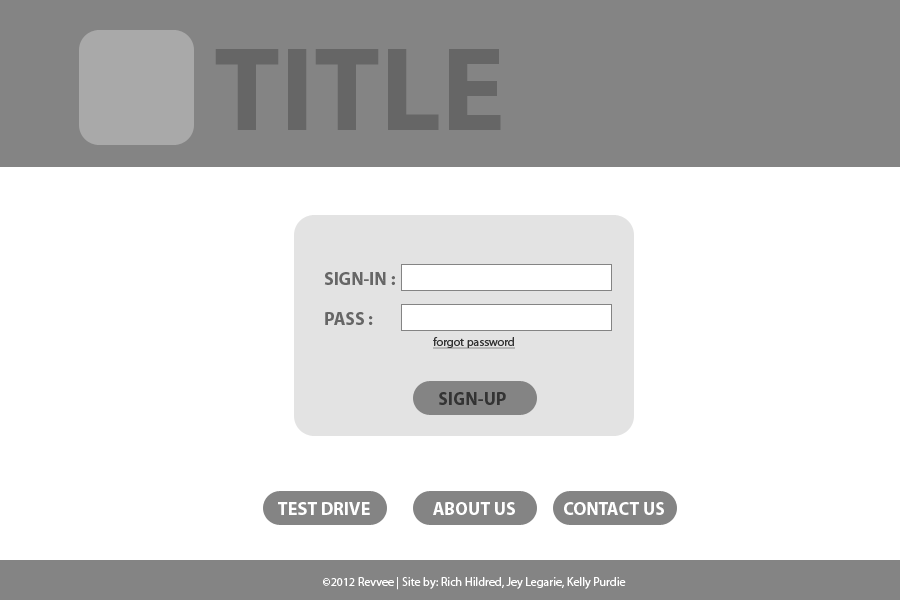
<style>
.page{position:relative;width:900px;height:600px;background:#ffffff}
.page>*{position:absolute;margin:0}
.t1{font:120px "MyriadPro-Bold";color:#666666}
.t2{font:18px/20px "MyriadPro-Bold";color:#666666}
.t3{font:12px "MyriadPro-Regular";color:#333333;text-decoration:underline}
.t4{font:18px "MyriadPro-Bold";color:#333333}
.t5{font:18px "MyriadPro-Bold";color:#ffffff}
.t6{font:12px "MyriadPro-Regular";color:#ffffff}
</style>
<div class="page">
<p class="t1" style="left:215px;top:49px;width:286px;height:81px">TITLE</p>
<p class="t2" style="left:324px;top:272px;width:71px;height:53px">SIGN-IN : <br><br>PASS :</p>
<p class="t3" style="left:433px;top:337px;width:82px;height:12px">forgot password</p>
<p class="t4" style="left:439px;top:392px;width:67px;height:13px">SIGN-UP</p>
<p class="t5" style="left:278px;top:502px;width:92px;height:13px">TEST DRIVE</p>
<p class="t5" style="left:433px;top:502px;width:82px;height:13px">ABOUT US</p>
<p class="t5" style="left:564px;top:502px;width:100px;height:13px">CONTACT US</p>
<p class="t6" style="left:323px;top:577px;width:303px;height:13px">©2012 Revvee | Site by: Rich Hildred, Jey Legarie, Kelly Purdie</p>
</div>
